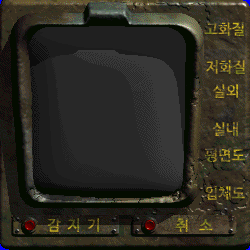
<style>
.page{position:relative;width:250px;height:250px}
.page>*{position:absolute;margin:0}
.t1{font:15px "NanumBarunGothicBold"}
</style>
<div class="page">
<p class="t1" style="left:204px;top:22px;width:40px;height:14px">고화질</p>
<p class="t1" style="left:205px;top:60px;width:40px;height:14px">저화질</p>
<p class="t1" style="left:212px;top:84px;width:26px;height:14px">실외</p>
<p class="t1" style="left:212px;top:122px;width:26px;height:14px">실내</p>
<p class="t1" style="left:205px;top:148px;width:40px;height:14px">평면도</p>
<p class="t1" style="left:205px;top:186px;width:40px;height:14px">입체도</p>
<p class="t1" style="left:47px;top:218px;width:52px;height:14px">감  지  기</p>
<p class="t1" style="left:175px;top:218px;width:38px;height:14px">취   소</p>
</div>
